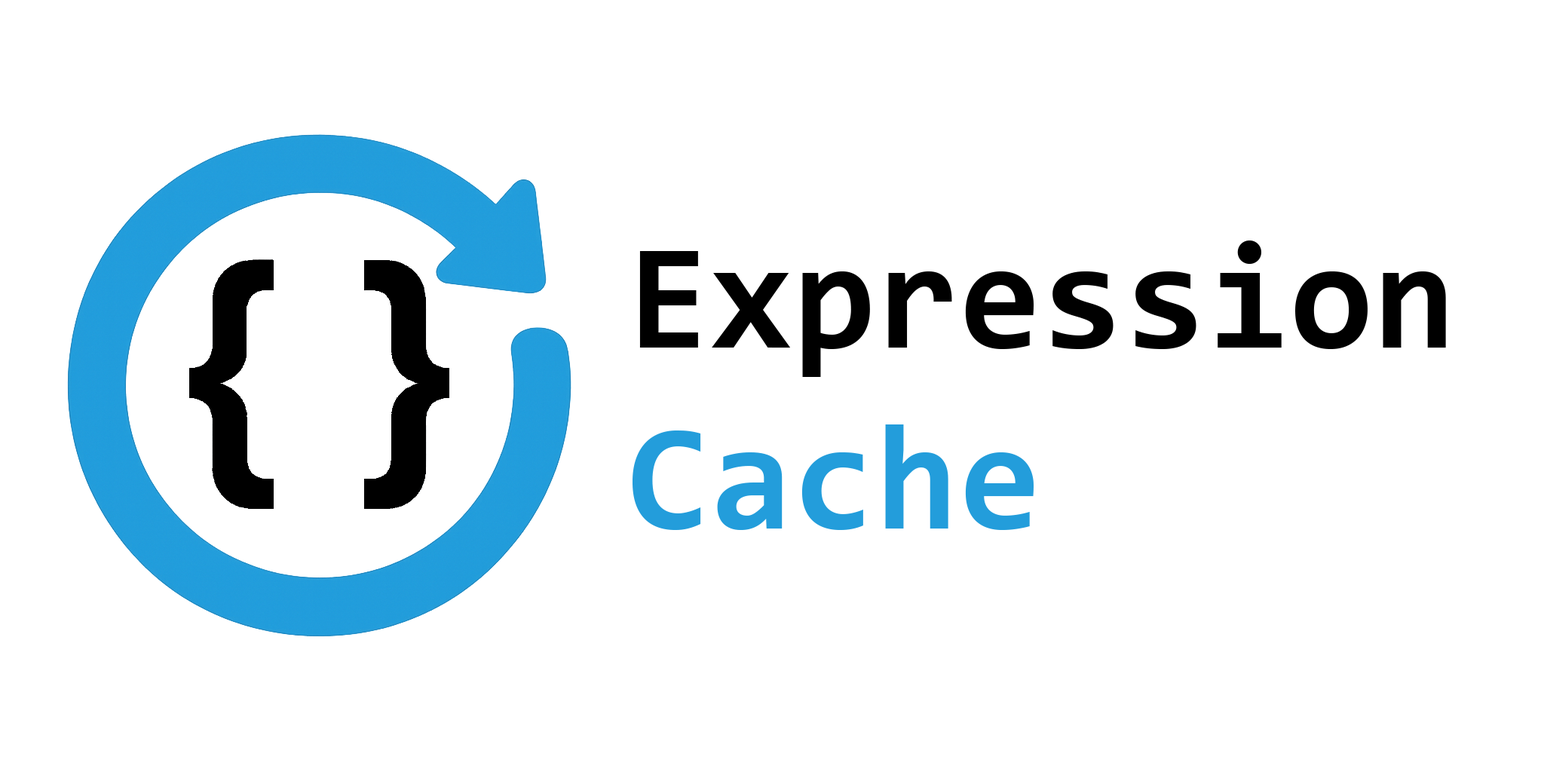
<style>
.page{position:relative;width:1544px;height:772px;background:#ffffff}
.page>*{position:absolute;margin:0}
.t1{font:150.8px "Consolas-Bold";color:#000000}
.t2{font:150.8px "Consolas-Bold";color:#239ddb}
</style>
<div class="page">
<p class="t1" style="left:633px;top:241px;width:813px;height:289px">Expression<br><span class="t2">Cache</span></p>
</div>
